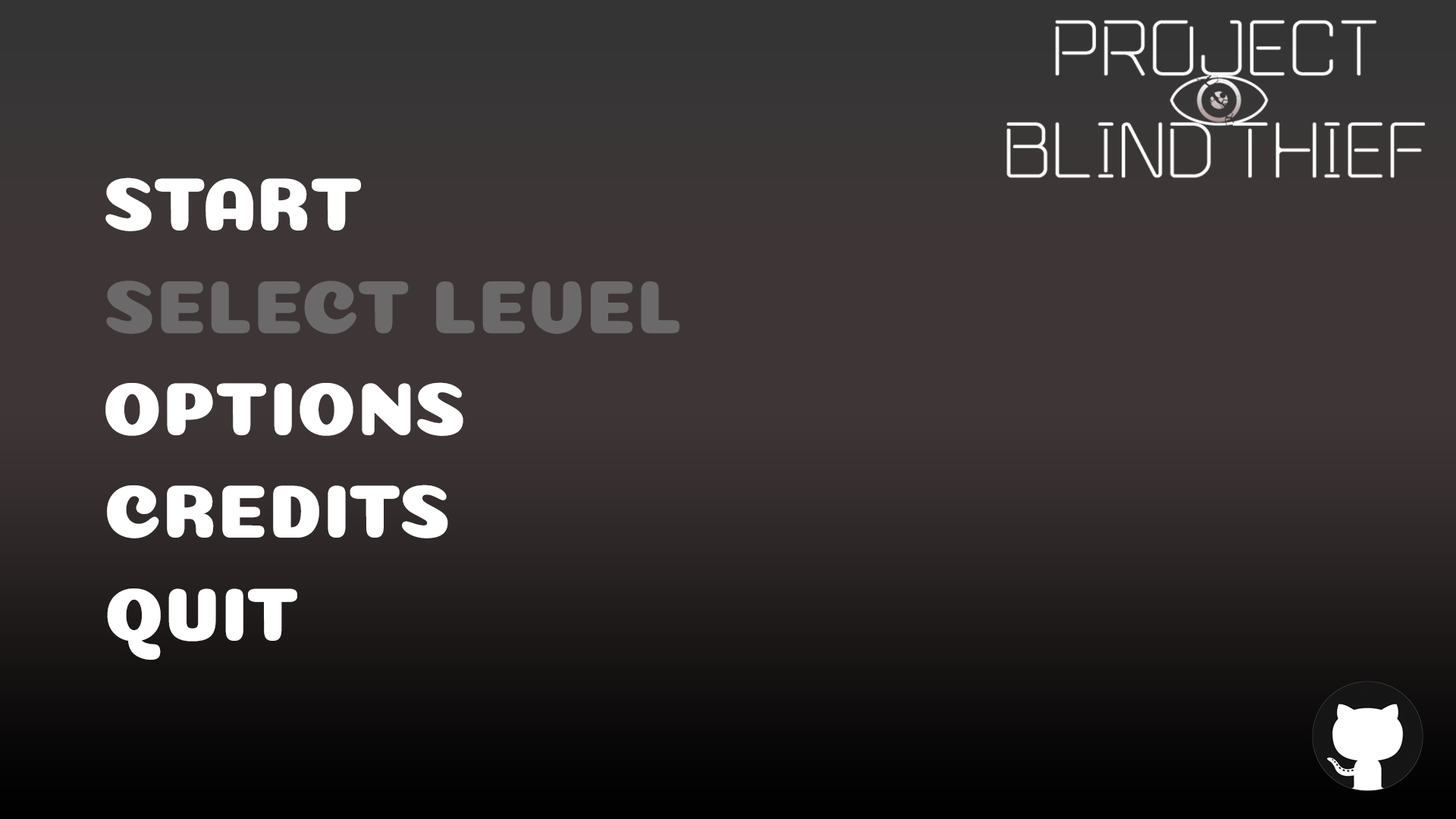
<style>
.page{position:relative;width:1456px;height:819px;background:#3e3636}
.page>*{position:absolute;margin:0}
.t1{font:75.8px "Coiny-Regular";color:#ffffff}
.t2{font:75.8px "Coiny-Regular";color:#7b7b7b}
</style>
<div class="page">
<p class="t1" style="left:105px;top:177px;width:256px;height:54px">START</p>
<p class="t2" style="left:106px;top:281px;width:573px;height:53px">SELECT LEVEL</p>
<p class="t1" style="left:105px;top:382px;width:358px;height:54px">OPTIONS</p>
<p class="t1" style="left:107px;top:485px;width:341px;height:53px">CREDITS</p>
<p class="t1" style="left:107px;top:588px;width:190px;height:72px">QUIT</p>
</div>
